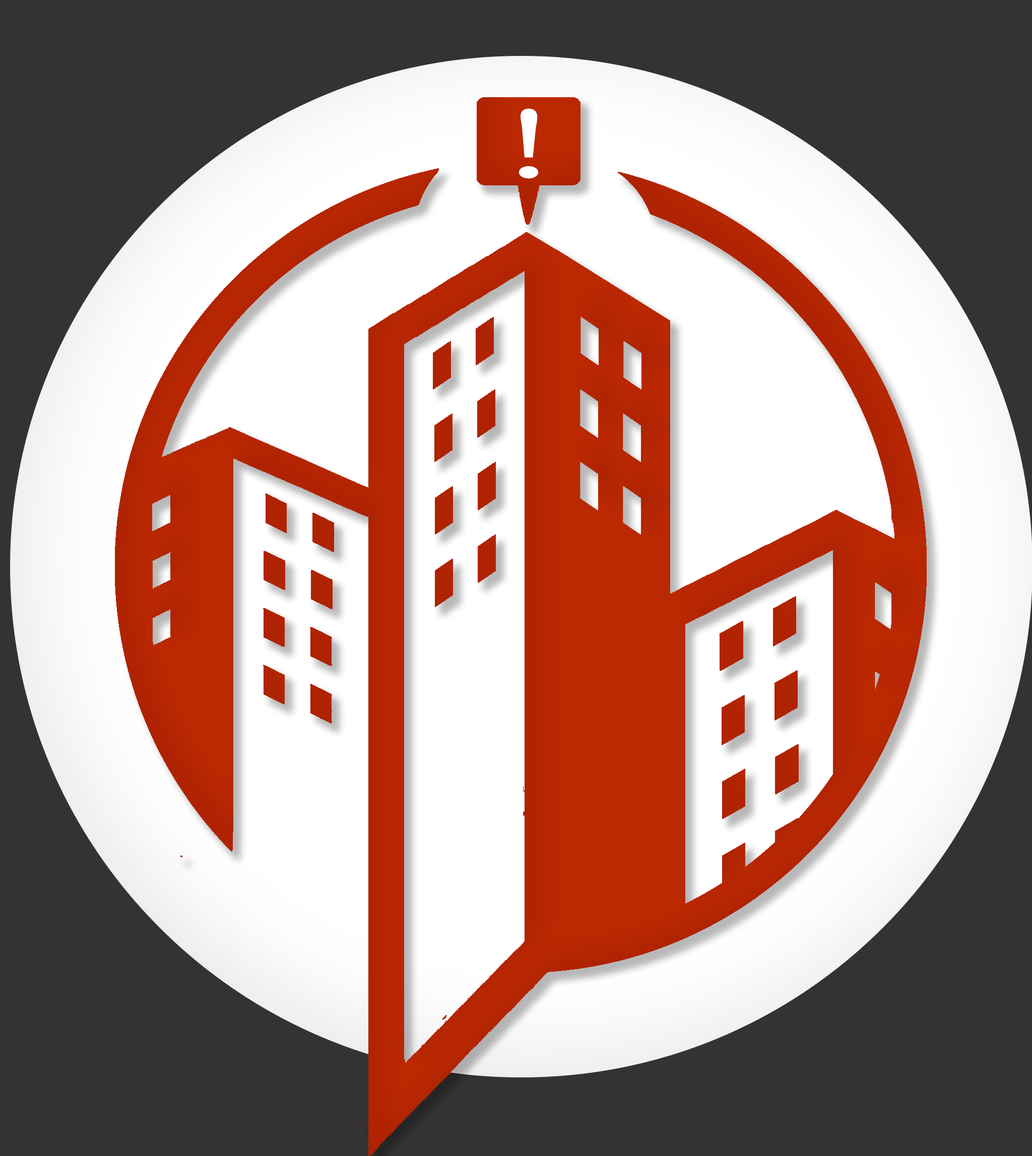
<style>
.page{position:relative;width:1032px;height:1156px;background:#333333}
.page>*{position:absolute;margin:0}
.t1{font:88.5px "InconsolataForPowerline-g";color:#ffffff;scale:1.57 1}
</style>
<div class="page">
<p class="t1" style="left:519px;top:108px;width:19px;height:71px">!</p>
</div>
